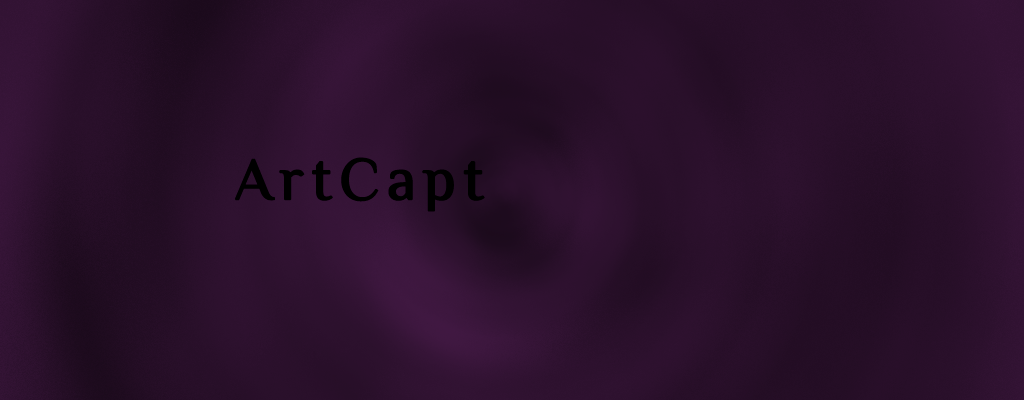
<style>
.page{position:relative;width:1024px;height:400px}
.page>*{position:absolute;margin:0}
.t1{font:60px "Philosopher";letter-spacing:0.1em;color:#000000;font-weight:bold}
</style>
<div class="page">
<p class="t1" style="left:234px;top:157px;width:251px;height:55px">ArtCapt</p>
</div>
